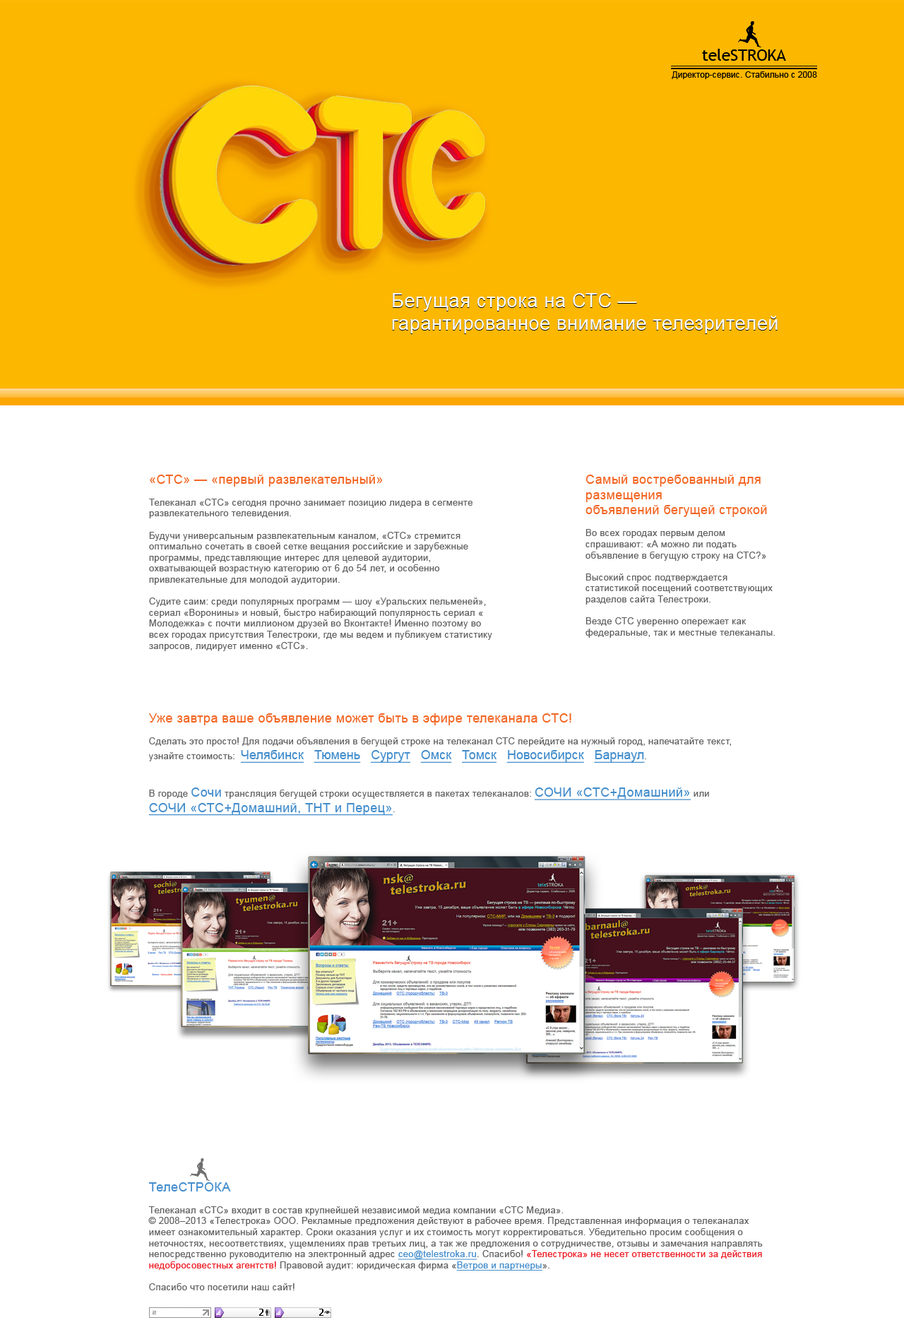
<style>
.page{position:relative;width:904px;height:1320px;background:#ffffff}
.page>*{position:absolute;margin:0}
.t1{font:41.4px "Swifty";color:#000000}
.t2{font:15.9px "TrebuchetMS";color:#000000}
.t3{font:8.2px "ArialMT";letter-spacing:0.025em;color:#000000}
.t4{font:19.1px "ArialMT";letter-spacing:0.025em;color:#ffffff}
.t5{font:9.2px "ArialMT";letter-spacing:0.025em;color:#626262}
.t6{font:12.7px "ArialMT";letter-spacing:0.025em;color:#f26522}
.t7{font:12.7px "ArialMT";color:#438dcc;text-decoration:underline}
.t8{font:9.2px "ArialMT";color:#626262}
.t9{font:12.7px "ArialMT";letter-spacing:0.025em;color:#438dcc}
.t10{font:12.7px "ArialMT";letter-spacing:0.025em;color:#438dcc;text-decoration:underline}
.t11{font:9.2px "ArialMT";letter-spacing:0.025em;color:#707070}
.t12{font:35.3px "Swifty";color:#707070}
.t13{font:12.7px/11.3px "ArialMT";letter-spacing:0.025em;color:#438dcc}
.t14{font:9.2px "ArialMT";letter-spacing:0.025em;color:#438dcc;text-decoration:underline}
.t15{font:9.2px "ArialMT";letter-spacing:0.025em;color:#ed1c24}
</style>
<div class="page">
<p class="t1" style="left:738px;top:21px;width:23px;height:26px">,</p>
<p class="t2" style="left:702px;top:49px;width:84px;height:12px">teleSTROKA</p>
<p class="t3" style="left:671px;top:71px;width:146px;height:8px">Директор-сервис. Стабильно с 2008</p>
<p class="t4" style="left:392px;top:294px;width:385px;height:40px">Бегущая строка на СТС — <br>гарантированное внимание телезрителей</p>
<p class="t4" style="left:392px;top:293px;width:385px;height:40px">Бегущая строка на СТС — <br>гарантированное внимание телезрителей</p>
<p class="t5" style="left:149px;top:474px;width:343px;height:177px"><span class="t6">«СТС» — «первый развлекательный»<br><br></span>Телеканал «CTC» сегодня прочно занимает позицию лидера в сегменте развлекательного телевидения. <br><br>Будучи универсальным развлекательным каналом, «СТС» стремится оптимально сочетать в своей сетке вещания российские и зарубежные программы, представляющие интерес для целевой аудитории, охватывающей возрастную категорию от 6 до 54 лет, и особенно привлекательные для молодой аудитории.<br><br>Судите саим: среди популярных программ — шоу «Уральских пельменей», сериал «Воронины» и новый, быстро набирающий популярность сериал «Молодежка» с почти миллионом друзей во Вконтакте! Именно поэтому во всех городах присутствия Телестроки, где мы ведем и публикуем статистику запросов, лидирует именно «СТС».</p>
<p class="t5" style="left:585px;top:474px;width:190px;height:164px"><span class="t6">Самый востребованный для размещения <br>объявлений бегущей строкой<br><br></span>Во всех городах первым делом спрашивают: «А можно ли подать объявление в бегущую строку на СТС?» <br><br>Высокий спрос подтверждается статистикой посещений соответствующих разделов сайта Телестроки. <br><br>Везде СТС уверенно опережает как федеральные, так и местные телеканалы.</p>
<p class="t5" style="left:148px;top:713px;width:583px;height:102px"><span class="t6">Уже завтра ваше объявление может быть в эфире телеканала СТС! <br></span><br>Сделать это просто! Для подачи объявления в бегущей строке на телеканал СТС перейдите на нужный город, напечатайте текст, узнайте стоимость:  <span class="t7">Челябинск   Тюмень   Сургут   Омск   Томск   Новосибирск   Барнаул</span><span class="t8">. <br></span><br><br>В городе <span class="t9">Сочи</span> трансляция бегущей строки осуществляется в пакетах телеканалов: <span class="t10">СОЧИ «СТС+Домашний»</span> или <br><span class="t10">СОЧИ «СТС+Домашний, ТНТ и Перец»</span><span class="t11">.</span></p>
<p class="t12" style="left:190px;top:1158px;width:20px;height:22px">,</p>
<p class="t5" style="left:148px;top:1182px;width:614px;height:108px"><span class="t13">ТелеСТРОКА<br></span><br>Телеканал «СТС» входит в состав крупнейшей независимой медиа компании «СТС Медиа». <br>© 2008–2013 «Телестрока» ООО. Рекламные предложения действуют в рабочее время. Представленная информация о телеканалах имеет ознакомительный характер. Сроки оказания услуг и их стоимость могут корректироваться. Убедительно просим сообщения о неточностях, несоответствиях, ущемлениях прав третьих лиц, а так же предложения о сотрудничестве, отзывы и замечания направлять непосредственно руководителю на электронный адрес <span class="t14">ceo@telestroka.ru</span>. Спасибо! <span class="t15">«Телестрока» не несет ответственности за действия недобросовестных агентств!</span> Правовой аудит: юридическая фирма «<span class="t14">Ветров и партнеры</span>».<br><br>Спасибо что посетили наш сайт!</p>
</div>
